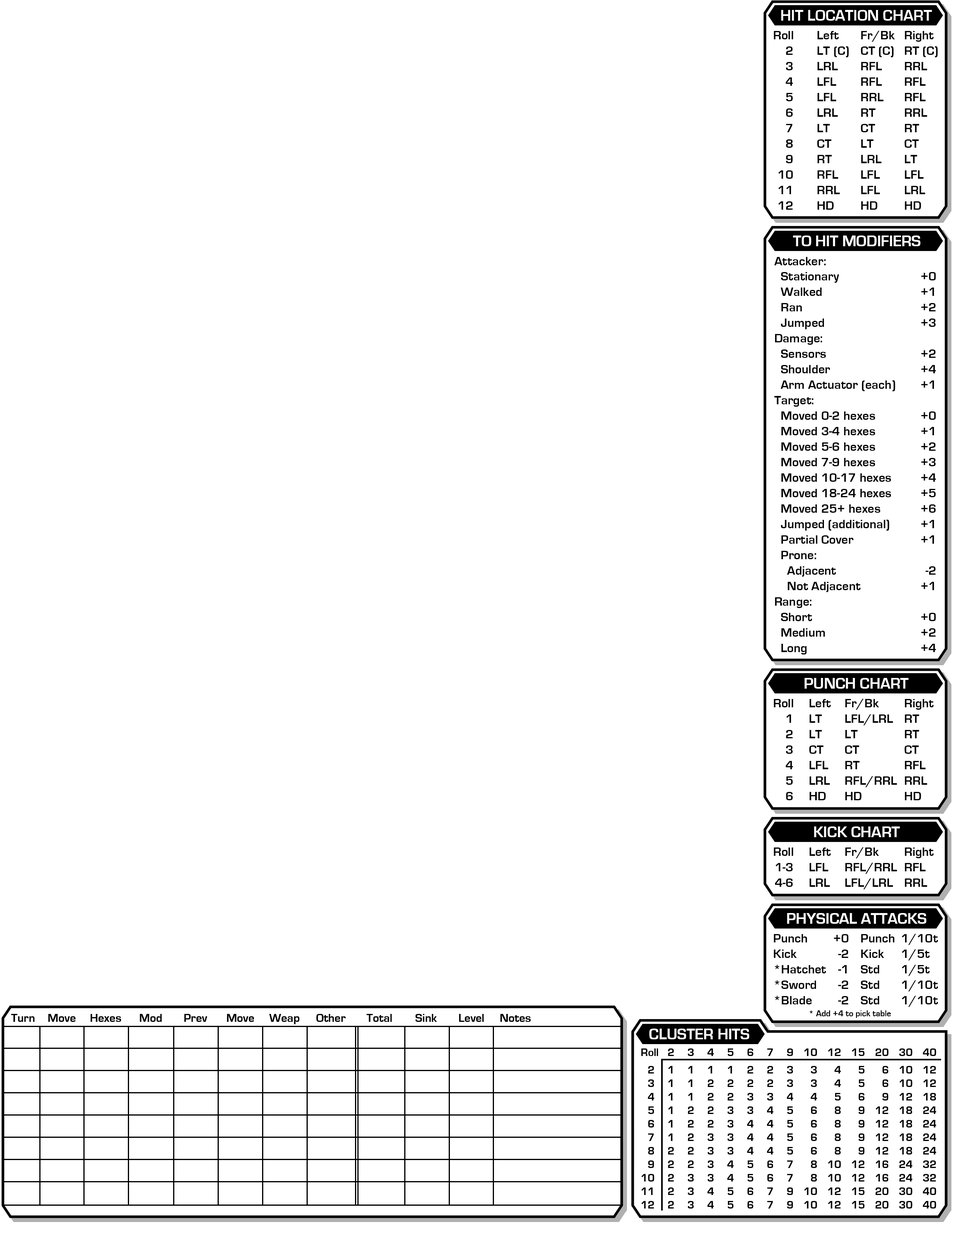
<style>
.page{position:relative;width:953px;height:1251px;background:#ffffff}
.page>*{position:absolute;margin:0}
.t1{font:12.9px "EurostileBold";color:#000000}
.t2{font:15.7px "EurostileBold";color:#ffffff}
.t3{font:8.6px "EurostileBold";color:#000000}
</style>
<div class="page">
<p class="t1" style="left:774px;top:31px;width:20px;height:179px;text-align:right">Roll<br>2<br>3<br>4<br>5<br>6<br>7<br>8<br>9<br>10<br>11<br>12</p>
<p class="t1" style="left:817px;top:31px;width:32px;height:179px">Left<br>LT (C)<br>LRL<br>LFL<br>LFL<br>LRL<br>LT<br>CT<br>RT<br>RFL<br>RRL<br>HD</p>
<p class="t1" style="left:861px;top:31px;width:34px;height:179px">Fr/Bk<br>CT (C)<br>RFL<br>RFL<br>RRL<br>RT<br>CT<br>LT<br>LRL<br>LFL<br>LFL<br>HD</p>
<p class="t1" style="left:905px;top:31px;width:33px;height:179px">Right<br>RT (C)<br>RRL<br>RFL<br>RFL<br>RRL<br>RT<br>CT<br>LT<br>LFL<br>LRL<br>HD</p>
<p class="t2" style="left:793px;top:236px;width:128px;height:10px">TO HIT MODIFIERS</p>
<p class="t1" style="left:774px;top:257px;width:122px;height:398px">Attacker:<br>  Stationary<br>  Walked<br>  Ran<br>  Jumped<br>Damage:<br>  Sensors<br>  Shoulder<br>  Arm Actuator (each)<br>Target:<br>  Moved 0-2 hexes<br>  Moved 3-4 hexes<br>  Moved 5-6 hexes<br>  Moved 7-9 hexes<br>  Moved 10-17 hexes<br>  Moved 18-24 hexes<br>  Moved 25+ hexes<br>  Jumped (additional)<br>  Partial Cover<br>  Prone:<br>    Adjacent<br>    Not Adjacent<br>Range:<br>  Short<br>  Medium<br>  Long</p>
<p class="t1" style="left:921px;top:272px;width:15px;height:380px;text-align:right">+0<br>+1<br>+2<br>+3<br><br>+2<br>+4<br>+1<br><br>+0<br>+1<br>+2<br>+3<br>+4<br>+5<br>+6<br>+1<br>+1<br><br>-2<br>+1<br><br>+0<br>+2<br>+4</p>
<p class="t2" style="left:805px;top:678px;width:104px;height:11px">PUNCH CHART</p>
<p class="t1" style="left:774px;top:699px;width:20px;height:101px;text-align:right">Roll<br>1<br>2<br>3<br>4<br>5<br>6</p>
<p class="t1" style="left:809px;top:699px;width:22px;height:101px">Left<br>LT<br>LT<br>CT<br>LFL<br>LRL<br>HD</p>
<p class="t1" style="left:845px;top:699px;width:52px;height:101px">Fr/Bk<br>LFL/LRL<br>LT<br>CT<br>RT<br>RFL/RRL<br>HD</p>
<p class="t1" style="left:905px;top:699px;width:29px;height:101px">Right<br>RT<br>RT<br>CT<br>RFL<br>RRL<br>HD</p>
<p class="t2" style="left:814px;top:826px;width:86px;height:11px">KICK CHART</p>
<p class="t1" style="left:774px;top:848px;width:20px;height:39px;text-align:right">Roll<br>1-3<br>4-6</p>
<p class="t1" style="left:809px;top:848px;width:22px;height:39px">Left<br>LFL<br>LRL</p>
<p class="t1" style="left:845px;top:847px;width:52px;height:43px">Fr/Bk<br>RFL/RRL<br>LFL/LRL</p>
<p class="t1" style="left:905px;top:848px;width:29px;height:39px">Right<br>RFL<br>RRL</p>
<p class="t2" style="left:787px;top:913px;width:140px;height:11px">PHYSICAL ATTACKS</p>
<p class="t1" style="left:774px;top:934px;width:52px;height:70px">Punch<br>Kick<br>*Hatchet<br>*Sword<br>*Blade</p>
<p class="t1" style="left:834px;top:934px;width:15px;height:70px;text-align:right">+0<br>-2<br>-1<br>-2<br>-2</p>
<p class="t1" style="left:861px;top:934px;width:34px;height:70px">Punch<br>Kick<br>Std<br>Std<br>Std</p>
<p class="t1" style="left:902px;top:934px;width:36px;height:73px">1/10t<br>1/5t<br>1/5t<br>1/10t<br>1/10t</p>
<p class="t3" style="left:809px;top:1010px;width:82px;height:8px">* Add +4 to pick table</p>
<p class="t2" style="left:649px;top:1029px;width:100px;height:10px">CLUSTER HITS</p>
</div>
